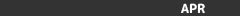
<style>
.page{position:relative;width:240px;height:16px;background:#333333}
.page>*{position:absolute;margin:0}
.t1{font:12.5px "RoundedMplus1c-ExtraBold";color:#ffffff}
</style>
<div class="page">
<p class="t1" style="left:181px;top:3px;width:24px;height:11px">APR</p>
</div>
